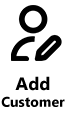
<style>
.page{position:relative;width:68px;height:131px;background:#ffffff}
.page>*{position:absolute;margin:0}
.t1{font:14px "MicrosoftTaiLe-Bold";color:#000000}
.t2{font:18px "MicrosoftTaiLe-Bold";color:#000000}
</style>
<div class="page">
<p class="t1" style="left:1px;top:76px;width:64px;height:31px;text-align:center"><span class="t2">Add<br></span>Customer</p>
</div>
